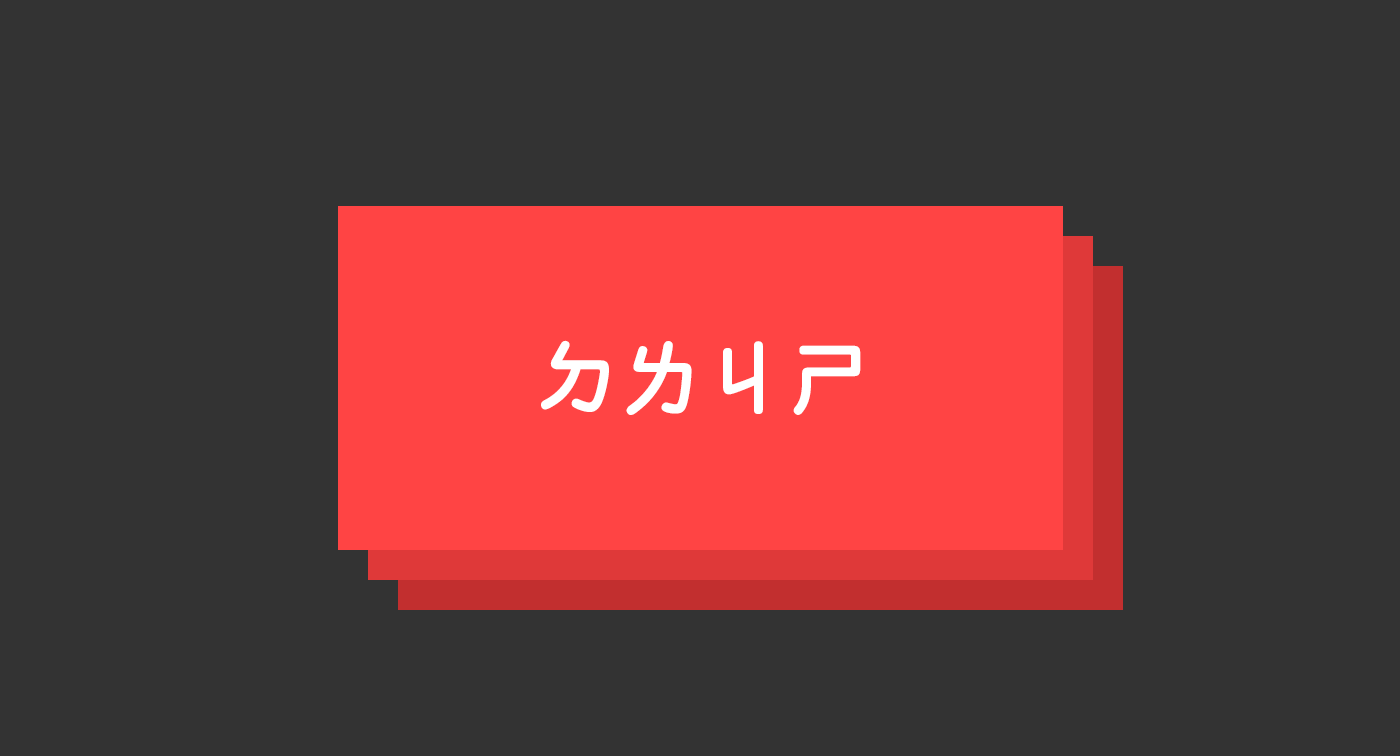
<style>
.page{position:relative;width:1400px;height:756px;background:#333333}
.page>*{position:absolute;margin:0}
.t1{font:78px "STYuanti-TC-Bold";letter-spacing:0.075em;color:#ffffff;text-transform:uppercase}
</style>
<div class="page">
<p class="t1" style="left:541px;top:340px;width:320px;height:75px">ㄉㄌㄐㄕ</p>
</div>
